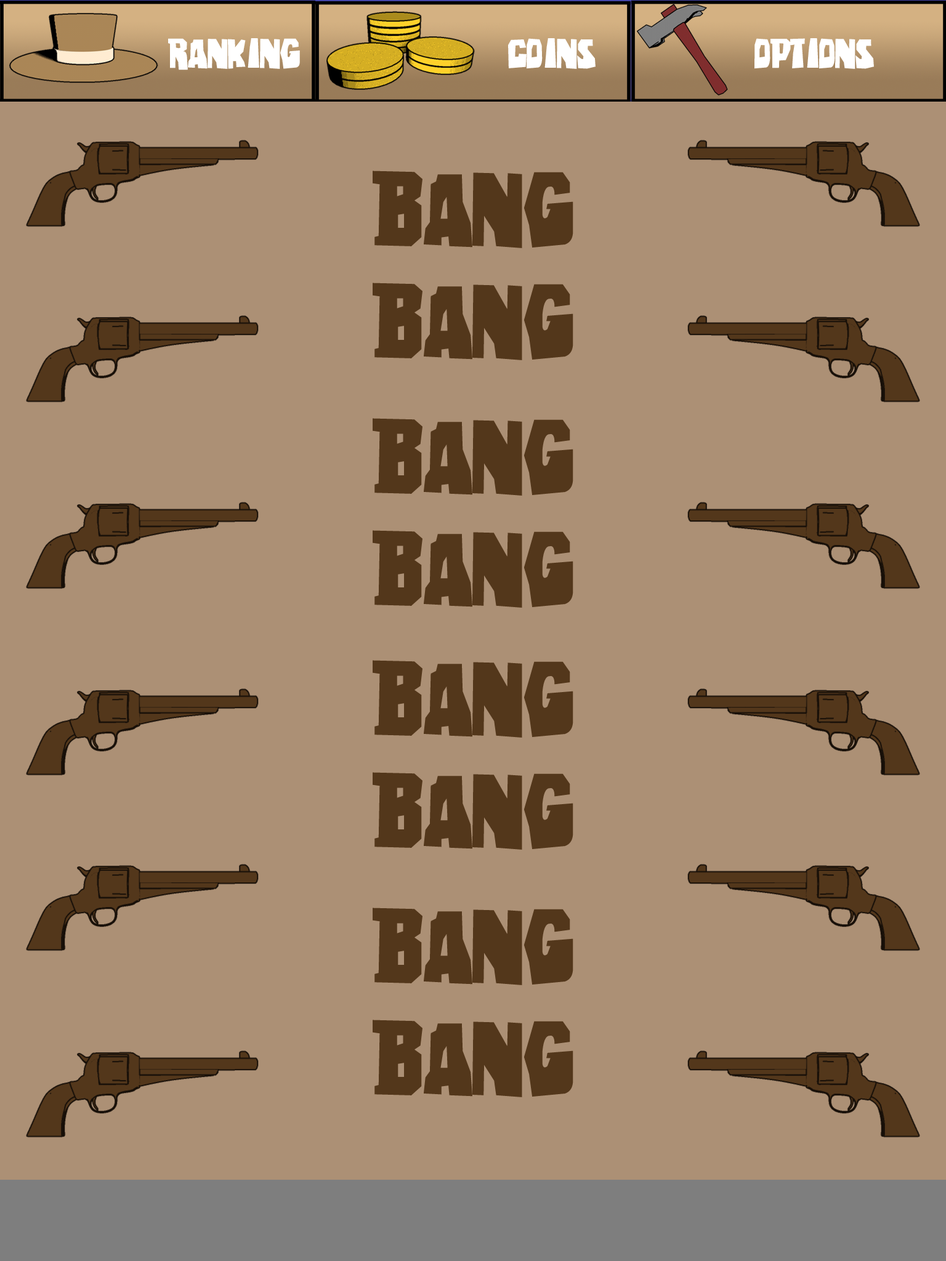
<style>
.page{position:relative;width:946px;height:1261px;background:#ac9075}
.page>*{position:absolute;margin:0}
.t1{font:92.4px "Eastwood";color:#53371b}
</style>
<div class="page">
<p class="t1" style="left:372px;top:171px;width:201px;height:189px;text-align:center">BANG<br>BANG</p>
<p class="t1" style="left:372px;top:418px;width:201px;height:190px;text-align:center">BANG<br>BANG</p>
<p class="t1" style="left:372px;top:660px;width:201px;height:190px;text-align:center">BANG<br>BANG</p>
<p class="t1" style="left:372px;top:908px;width:201px;height:189px;text-align:center">BANG<br>BANG</p>
</div>
